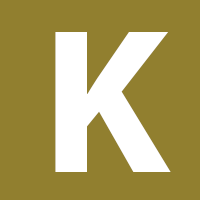
<style>
.page{position:relative;width:200px;height:200px;background:#917f2f}
.page>*{position:absolute;margin:0}
.t1{font:208.3px "MyriadPro-Bold";color:#ffffff}
</style>
<div class="page">
<p class="t1" style="left:55px;top:32px;width:116px;height:140px">K</p>
</div>
